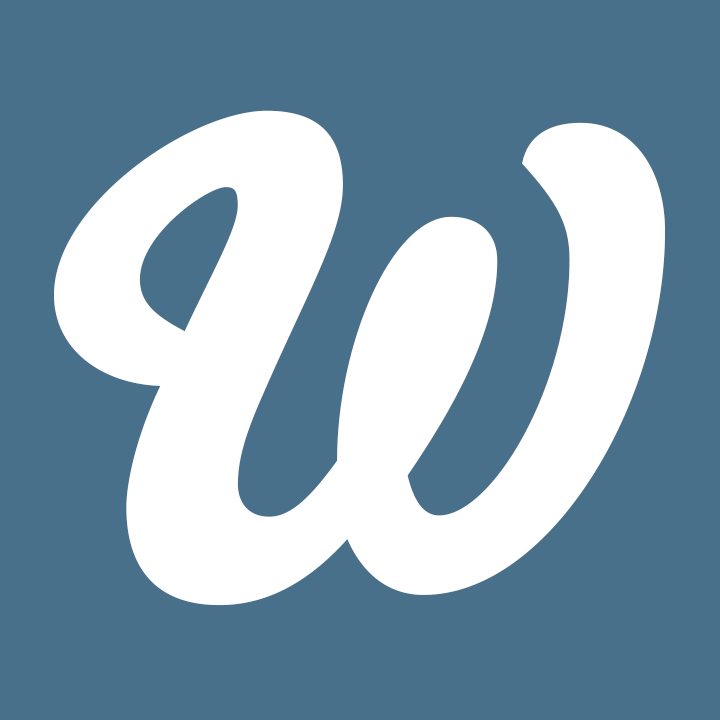
<style>
.page{position:relative;width:720px;height:720px;background:#49708a}
.page>*{position:absolute;margin:0}
.t1{font:635.3px "Bello-Pro";color:#ffffff}
</style>
<div class="page">
<p class="t1" style="left:54px;top:110px;width:611px;height:496px">W</p>
</div>
